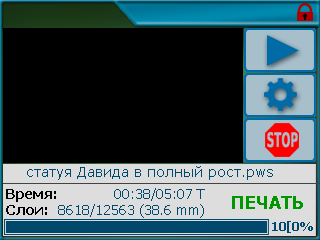
<style>
.page{position:relative;width:320px;height:240px;background:#000000}
.page>*{position:absolute;margin:0}
.t1{font:14px "Verdana";color:#00496c}
.t2{font:14px "Tahoma-Bold";color:#000000}
.t3{font:14px "Tahoma";color:#00496c}
.t4{font:18px "Tahoma-Bold";color:#009700}
.t5{font:12px "Tahoma-Bold";color:#00496c}
</style>
<div class="page">
<p class="t1" style="left:27px;top:166px;width:246px;height:14px">статуя Давида в полный рост.pws</p>
<p class="t2" style="left:6px;top:189px;width:50px;height:13px">Время:</p>
<p class="t3" style="left:114px;top:188px;width:91px;height:13px">00:38/05:07 T</p>
<p class="t4" style="left:232px;top:196px;width:71px;height:13px">ПЕЧАТЬ</p>
<p class="t2" style="left:6px;top:205px;width:41px;height:10px">Слои:</p>
<p class="t3" style="left:58px;top:204px;width:146px;height:14px">8618/12563 (38.6 mm)</p>
<p class="t5" style="left:272px;top:221px;width:41px;height:12px">10[0%</p>
</div>
